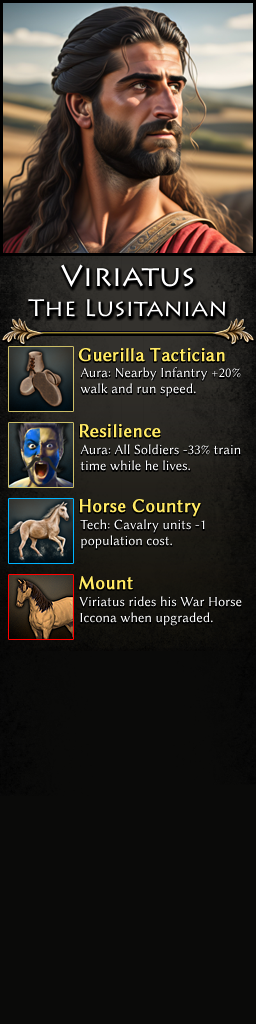
<style>
.page{position:relative;width:256px;height:1024px;background:#0a0a09}
.page>*{position:absolute;margin:0}
.t1{font:24px/30px "Lithos";color:#ffffff}
.t2{font:30px/30px "Lithos";color:#ffffff}
.t3{font:19px "LinBiolinumO";color:#ffe963;font-weight:bold}
.t4{font:14px "LinBiolinumO";color:#ffffff}
</style>
<div class="page">
<p class="t1" style="left:28px;top:264px;width:198px;height:53px;text-align:center"><span class="t2">Viriatus<br></span>The Lusitanian</p>
<p class="t3" style="left:78px;top:347px;width:147px;height:15px">Guerilla Tactician</p>
<p class="t4" style="left:80px;top:367px;width:161px;height:30px">Aura: Nearby Infantry +20% <br>walk and run speed.</p>
<p class="t3" style="left:79px;top:424px;width:82px;height:14px">Resilience</p>
<p class="t4" style="left:80px;top:444px;width:161px;height:27px">Aura: All Soldiers -33% train <br>time while he lives.</p>
<p class="t3" style="left:79px;top:499px;width:122px;height:18px">Horse Country</p>
<p class="t4" style="left:80px;top:519px;width:125px;height:30px">Tech: Cavalry units -1 <br>population cost.</p>
<p class="t3" style="left:79px;top:576px;width:54px;height:14px">Mount</p>
<p class="t4" style="left:79px;top:596px;width:163px;height:30px">Viriatus rides his War Horse <br>Iccona when upgraded.</p>
</div>
